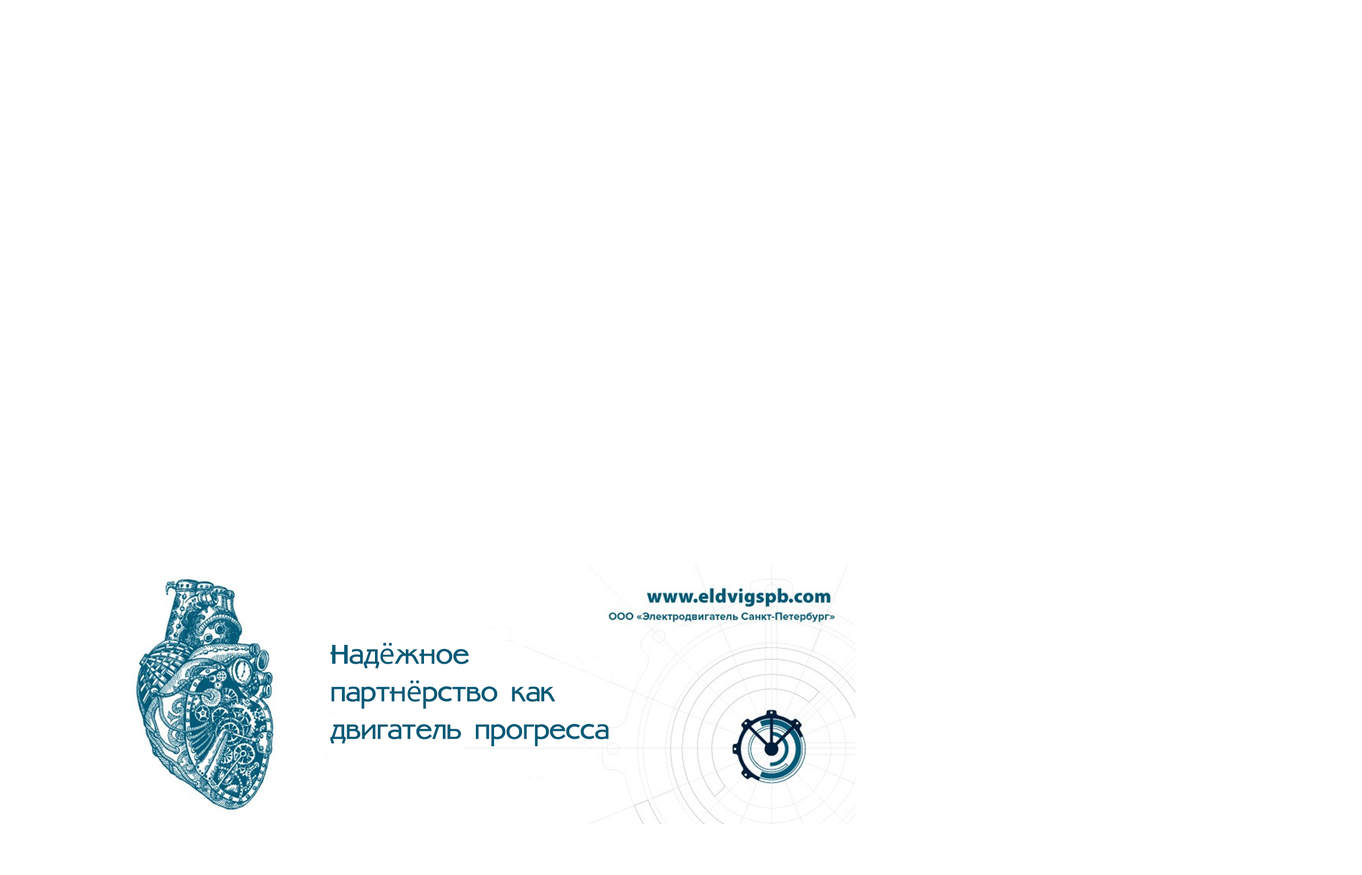
<style>
.page{position:relative;width:1362px;height:875px;background:#ffffff}
.page>*{position:absolute;margin:0}
.t1{font:31.3px "AmbassadoreType";color:#015a77}
.t2{font:31.3px "MyriadPro-Regular";color:#015a77}
</style>
<div class="page">
<p class="t1" style="left:330px;top:643px;width:279px;height:104px">Над<span class="t2">ё</span>жное партн<span class="t2">ё</span>рство как двигатель прогресса</p>
</div>
